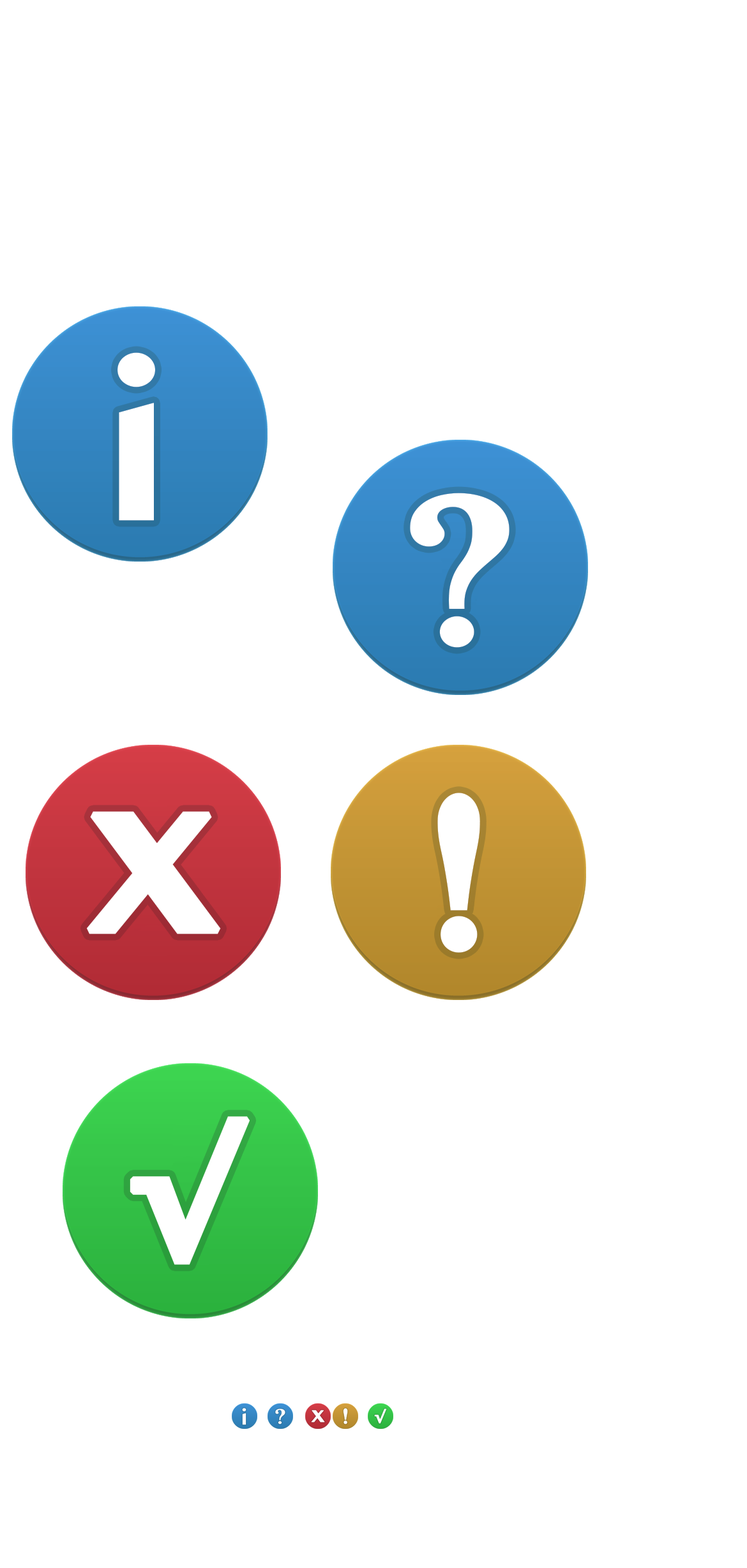
<style>
.page{position:relative;width:747px;height:1568px;background:#ffffff}
.page>*{position:absolute;margin:0}
.t1{font:217px "MyanmarMN-Bold";color:#ffffff;font-weight:bold}
.t2{font:217px "Cochin-Bold";color:#ffffff;font-weight:bold}
</style>
<div class="page">
<p class="t1" style="left:117px;top:352px;width:38px;height:169px">i</p>
<p class="t1" style="left:410px;top:493px;width:99px;height:155px">?</p>
<p class="t1" style="left:437px;top:793px;width:43px;height:160px">!</p>
<p class="t1" style="left:86px;top:811px;width:135px;height:123px">x</p>
<p class="t2" style="left:130px;top:1116px;width:120px;height:149px">√</p>
</div>
